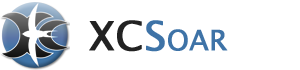
<style>
.page{position:relative;width:300px;height:70px;background:#ffffff}
.page>*{position:absolute;margin:0}
.t1{font:40px "LucidaSansUnicode";color:#3e73a7;font-variant:small-caps;font-weight:bold}
.t2{font:40px "LucidaSansUnicode";color:#222222;font-variant:small-caps;font-weight:bold}
</style>
<div class="page">
<p class="t1" style="left:89px;top:20px;width:139px;height:32px"><span class="t2">XC</span>Soar</p>
</div>
